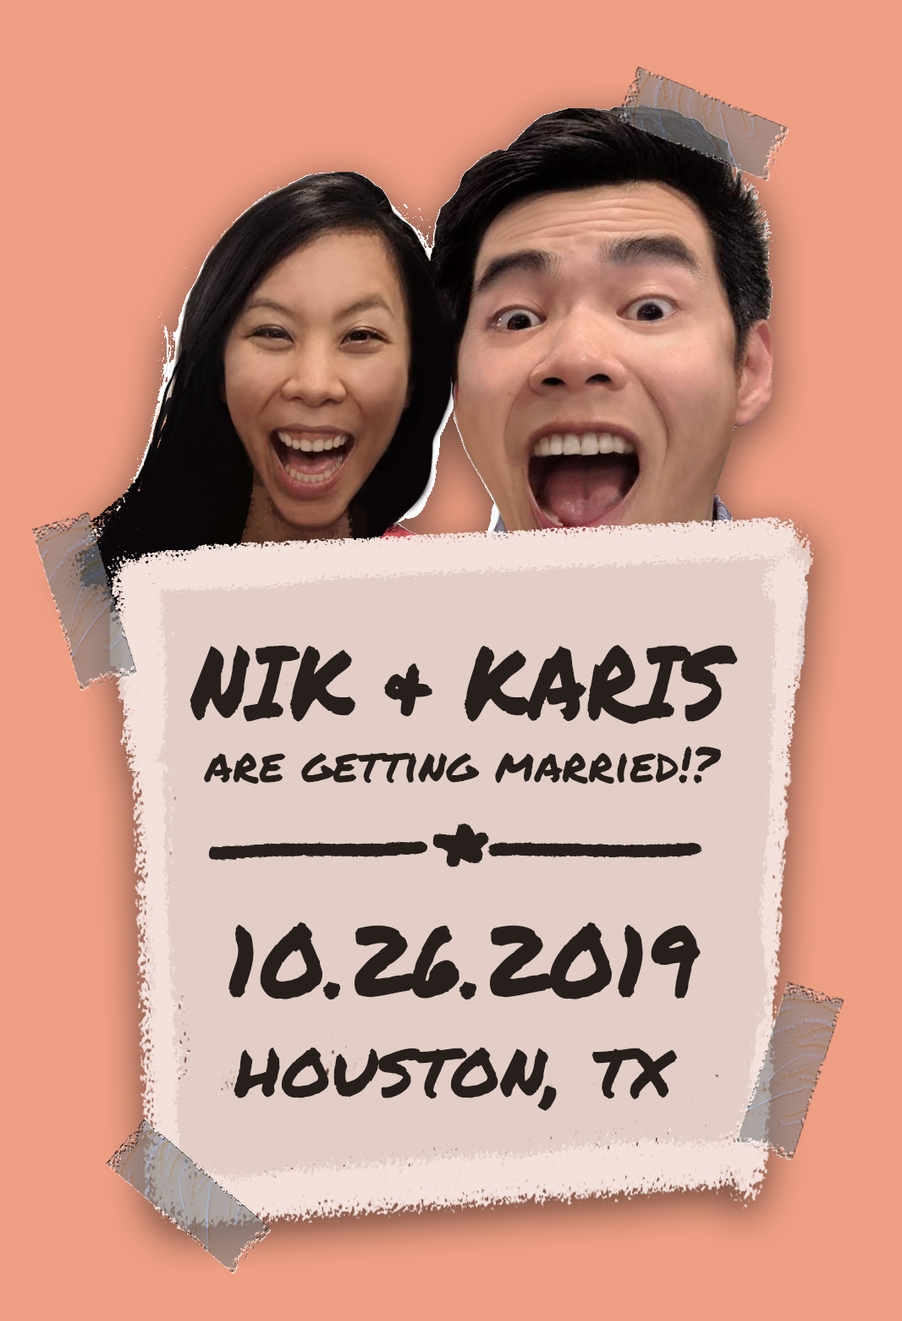
<style>
.page{position:relative;width:902px;height:1321px;background:#ee9e83}
.page>*{position:absolute;margin:0}
.t1{font:102.6px "PermanentMarker-Regular";color:#261f1c;scale:0.81 1}
.t2{font:48px "PermanentMarker-Regular";color:#261f1c}
.t3{font:98.5px "PermanentMarker-Regular";color:#261f1c}
.t4{font:80.5px "PermanentMarker-Regular";color:#261f1c}
</style>
<div class="page">
<p class="t1" style="left:190px;top:645px;width:548px;height:80px">NIK &amp; KARIS</p>
<p class="t2" style="left:203px;top:747px;width:518px;height:37px">are getting married!?</p>
<p class="t3" style="left:229px;top:922px;width:472px;height:79px">10.26.2019</p>
<p class="t4" style="left:234px;top:1047px;width:444px;height:64px">houston, tx</p>
</div>
